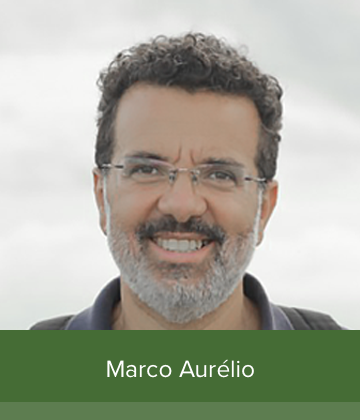
<style>
.page{position:relative;width:360px;height:420px}
.page>*{position:absolute;margin:0}
.t1{font:24.6px "ProximaNova-Regular";color:#ffffff}
</style>
<div class="page">
<p class="t1" style="left:107px;top:359px;width:147px;height:19px">Marco Aurélio</p>
</div>
